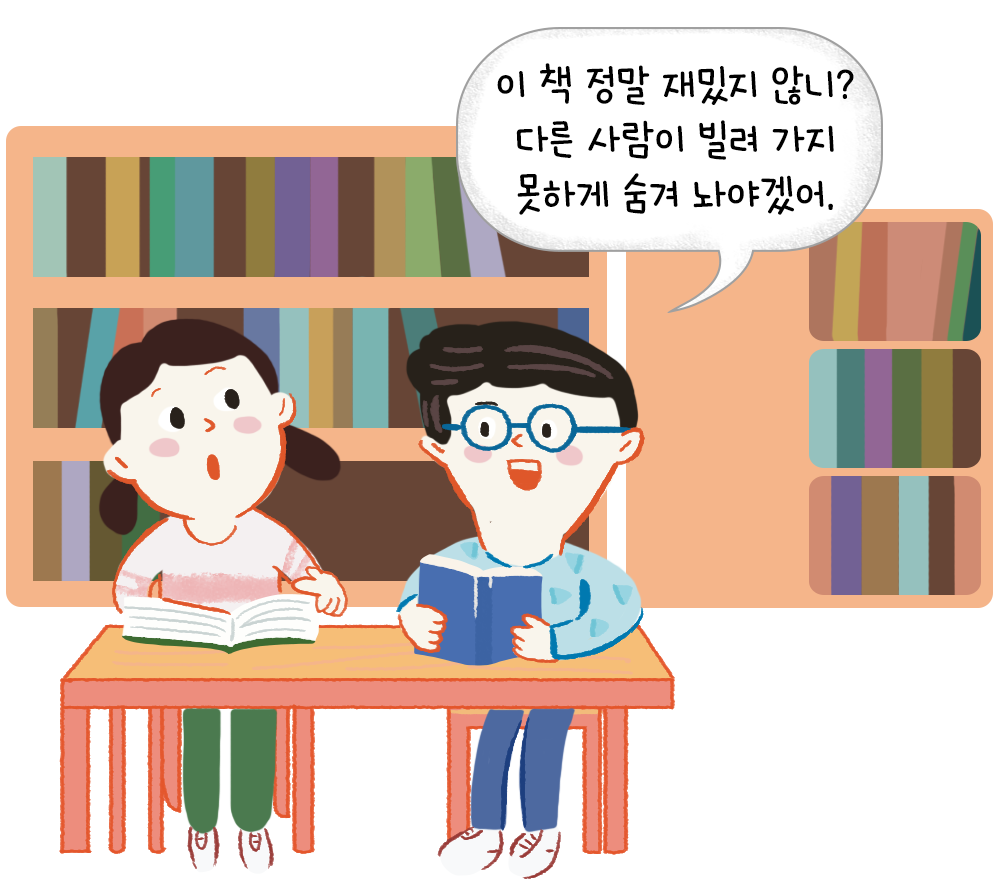
<style>
.page{position:relative;width:1000px;height:880px;background:#ffffff}
.page>*{position:absolute;margin:0}
.t1{font:45.7px "HakgyoansimNadeuriOTF-L";color:#000000}
</style>
<div class="page">
<p class="t1" style="left:497px;top:63px;width:357px;height:152px;text-align:center">이 책 정말 재밌지 않니?<br>다른 사람이 빌려 가지<br>못하게 숨겨 놔야겠어.</p>
</div>
